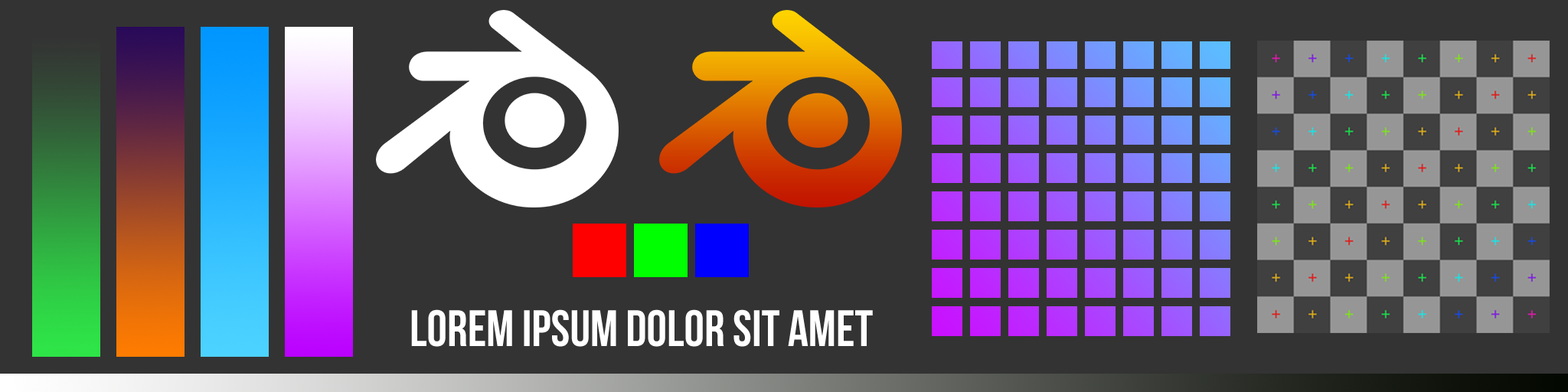
<style>
.page{position:relative;width:1568px;height:392px;background:#333333}
.page>*{position:absolute;margin:0}
.t1{font:51px "BebasNeue";color:#ffffff}
</style>
<div class="page">
<p class="t1" style="left:411px;top:309px;width:462px;height:38px">Lorem ipsum dolor sit amet</p>
</div>
